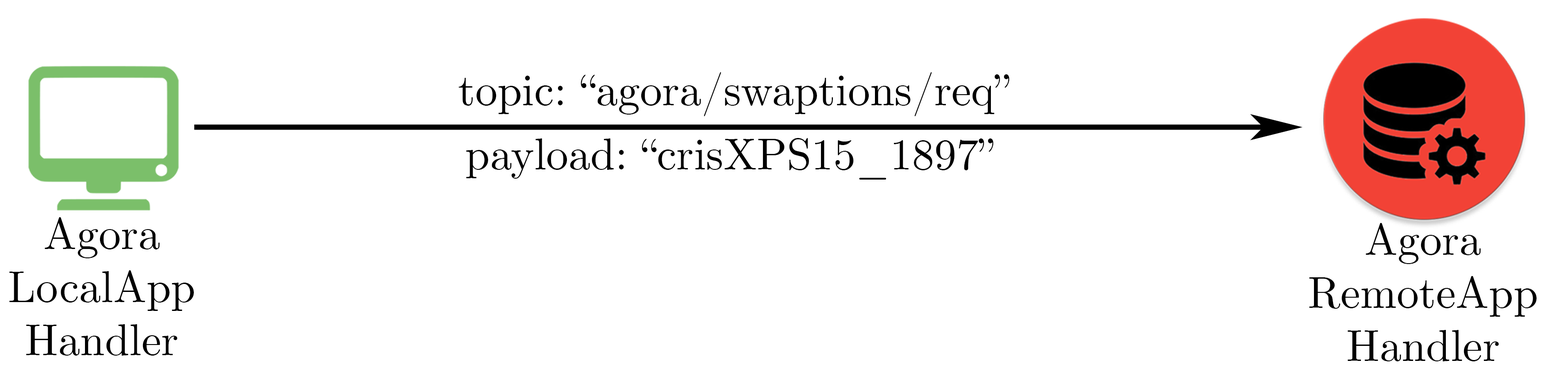
<style>
.page{position:relative;width:1568px;height:387px;background:#ffffff}
.page>*{position:absolute;margin:0}
.t1{font:44.3px "CMUSerif-Roman";color:#000000}
</style>
<div class="page">
<p class="t1" style="left:458px;top:72px;width:551px;height:44px">topic: “agora/swaptions/req”</p>
<p class="t1" style="left:466px;top:138px;width:528px;height:42px">payload: “crisXPS15_1897”</p>
<p class="t1" style="left:9px;top:217px;width:185px;height:139px;text-align:center">Agora<br>LocalApp<br>Handler</p>
<p class="t1" style="left:1309px;top:223px;width:228px;height:139px;text-align:center">Agora<br>RemoteApp<br>Handler</p>
</div>
